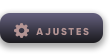
<style>
.page{position:relative;width:110px;height:55px}
.page>*{position:absolute;margin:0}
.t1{font:10px "Gilroy-ExtraBold";letter-spacing:0.19em;color:#b49494;text-transform:uppercase}
</style>
<div class="page">
<p class="t1" style="left:36px;top:27px;width:53px;height:9px">aJUSTES</p>
</div>
